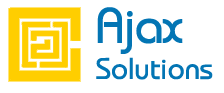
<style>
.page{position:relative;width:224px;height:93px;background:#ffffff}
.page>*{position:absolute;margin:0}
.t1{font:30px "Bauhaus";color:#0375b4}
.t2{font:50px "Bauhaus";color:#0375b4}
</style>
<div class="page">
<p class="t1" style="left:96px;top:7px;width:117px;height:73px"><span class="t2">Ajax<br></span>Solutions</p>
</div>
